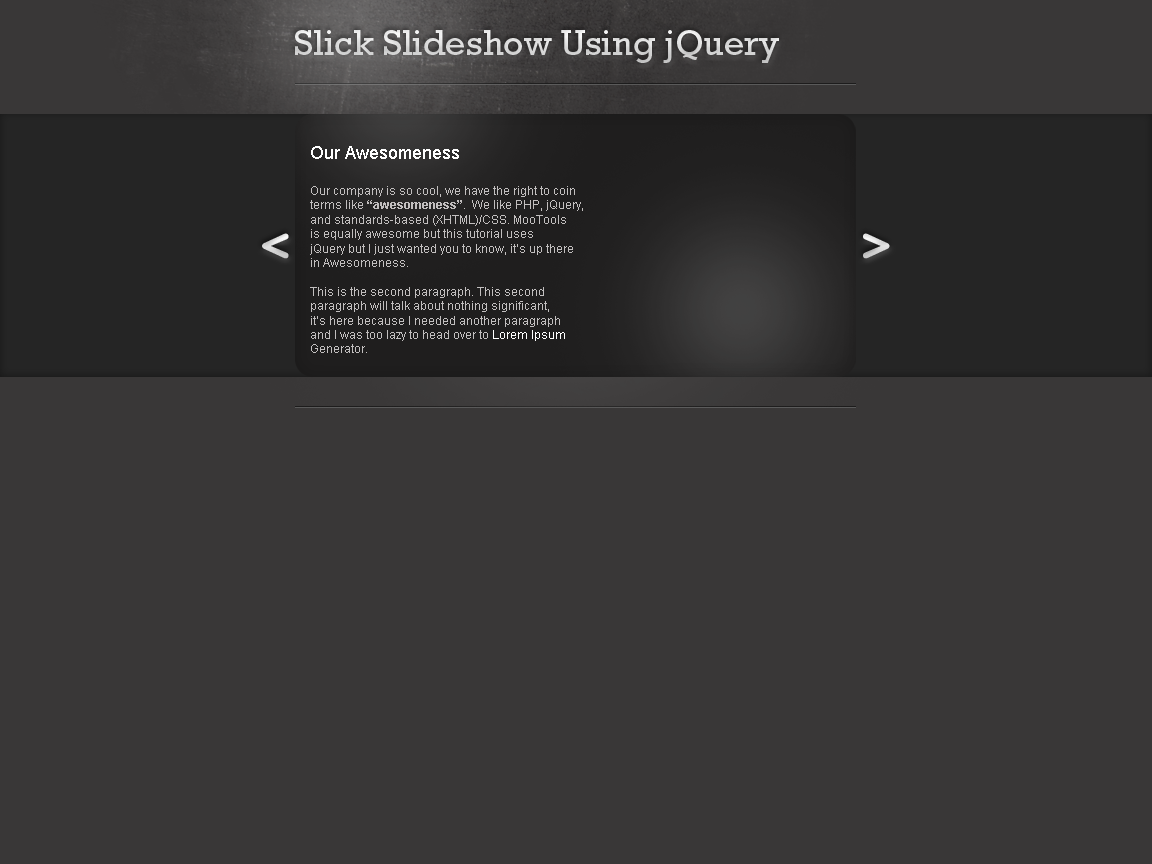
<style>
.page{position:relative;width:1152px;height:864px;background:#393737}
.page>*{position:absolute;margin:0}
.t1{font:36px "RockwellStd";color:#dadada}
.t2{font:12px "ArialMT";color:#c2bfbf}
.t3{font:18px "ArialMT";color:#ffffff}
.t4{font:12px "Arial-BoldMT";color:#c2bfbf}
.t5{font:12px "ArialMT";color:#ffffff}
</style>
<div class="page">
<p class="t1" style="left:295px;top:30px;width:484px;height:33px">Slick Slideshow Using jQuery</p>
<p class="t2" style="left:310px;top:146px;width:273px;height:207px"><span class="t3">Our Awesomeness<br><br></span>Our company is so cool, we have the right to coin<br>terms like <span class="t4">“awesomeness”</span>.  We like PHP, jQuery, <br>and standards-based (XHTML)/CSS. MooTools<br>is equally awesome but this tutorial uses<br>jQuery but I just wanted you to know, it’s up there<br>in Awesomeness.<br><br>This is the second paragraph. This second<br>paragraph will talk about nothing significant,<br>it’s here because I needed another paragraph<br>and I was too lazy to head over to <span class="t5">Lorem Ipsum<br></span>Generator.</p>
</div>
